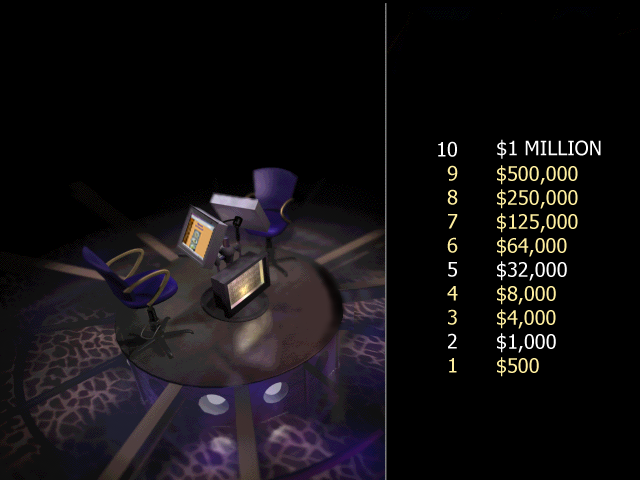
<style>
.page{position:relative;width:640px;height:480px;background:#000000}
.page>*{position:absolute;margin:0}
.t1{font:20px "Tahoma";color:#ffef9f}
.t2{font:20px "Tahoma";color:#ffffff}
</style>
<div class="page">
<p class="t1" style="left:438px;top:141px;width:20px;height:232px;text-align:right"><span class="t2">10<br></span>9<br>8<br>7<br>6<br><span class="t2">5<br></span>4<br>3<br><span class="t2">2<br></span>1</p>
<p class="t2" style="left:497px;top:139px;width:104px;height:20px">$1 MILLION</p>
<p class="t1" style="left:497px;top:165px;width:81px;height:212px">$500,000<br>$250,000<br>$125,000<br>$64,000<br><span class="t2">$32,000<br></span>$8,000<br>$4,000<br><span class="t2">$1,000<br></span>$500</p>
</div>
